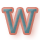
<style>
.page{position:relative;width:40px;height:40px;background:#ffffff}
.page>*{position:absolute;margin:0}
.t1{font:34px "MuseoSlab-500";color:#5a828a}
</style>
<div class="page">
<p class="t1" style="left:3px;top:9px;width:34px;height:24px">W</p>
</div>
